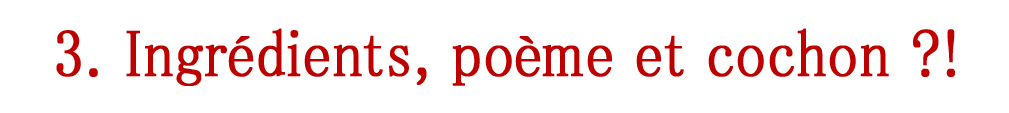
<style>
.page{position:relative;width:1009px;height:113px;background:#ffffff}
.page>*{position:absolute;margin:0}
.t1{font:66.6px "MS-PMincho";color:#bd0000;font-weight:bold;scale:0.89 1}
</style>
<div class="page">
<p class="t1" style="left:56px;top:28px;width:899px;height:58px">3. Ingrédients, poème et cochon ?!</p>
</div>
